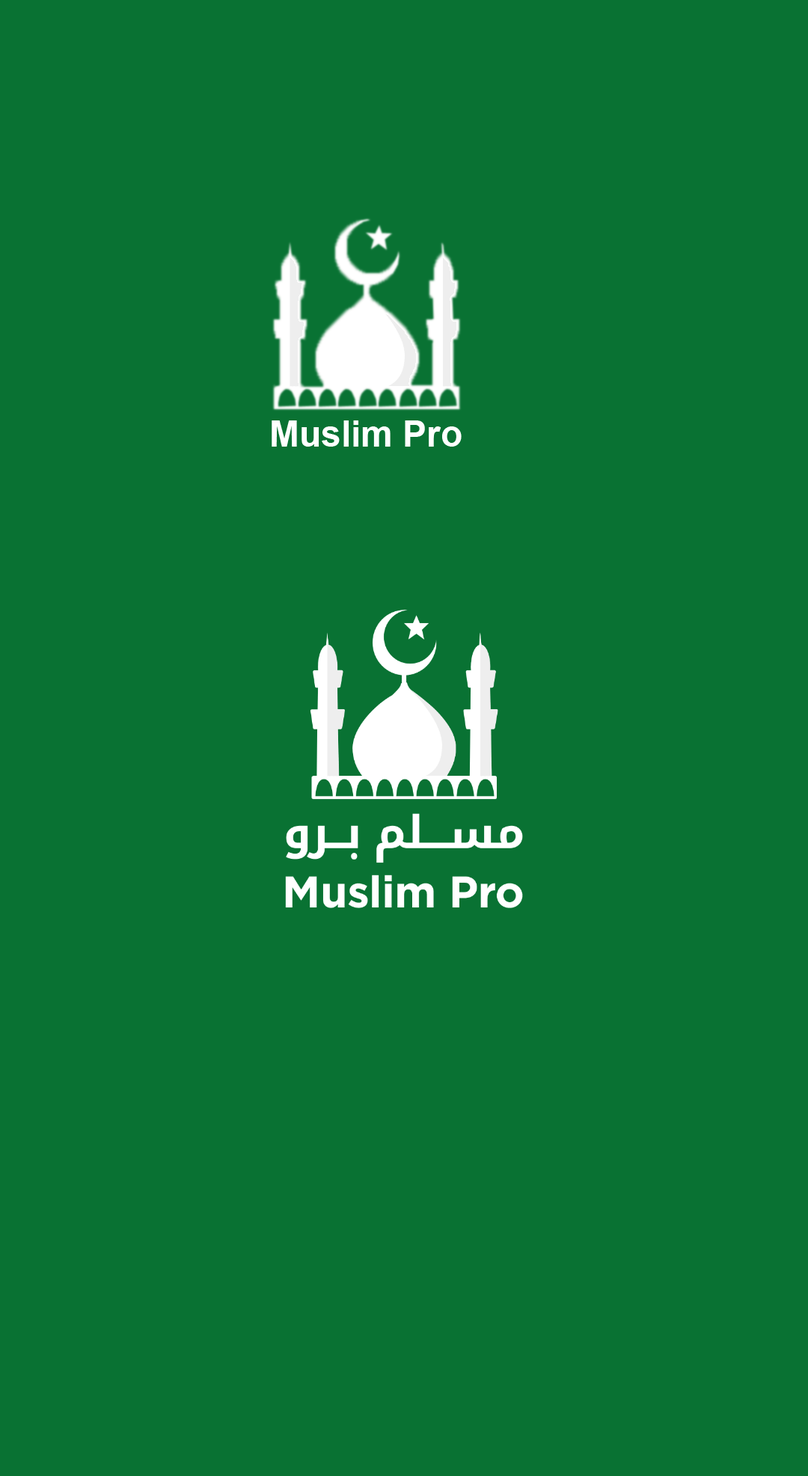
<style>
.page{position:relative;width:808px;height:1476px;background:#097233}
.page>*{position:absolute;margin:0}
.t1{font:35.9px "Arial-BoldMT";color:#ffffff}
</style>
<div class="page">
<p class="t1" style="left:272px;top:420px;width:190px;height:27px">Muslim Pro</p>
</div>
